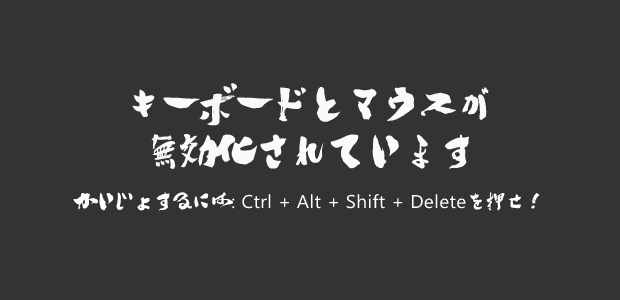
<style>
.page{position:relative;width:620px;height:300px;background:#333333}
.page>*{position:absolute;margin:0}
.t1{font:35.3px/47.1px "sweet-heavy-calligraphy";letter-spacing:0.02em;color:#fafafa}
.t2{font:18.6px "YuGothicUI-Regular";letter-spacing:0.02em;color:#ffffff}
.t3{font:18.6px "sweet-heavy-calligraphy";letter-spacing:0.02em;color:#ffffff}
</style>
<div class="page">
<p class="t1" style="left:132px;top:83px;width:357px;height:86px;text-align:center">キーボードとマウスが<br>無効化されています</p>
<p class="t2" style="left:73px;top:192px;width:467px;height:19px"><span class="t3">かいじょするには</span>: Ctrl + Alt + Shift + Delete<span class="t3">を押せ！</span></p>
</div>
